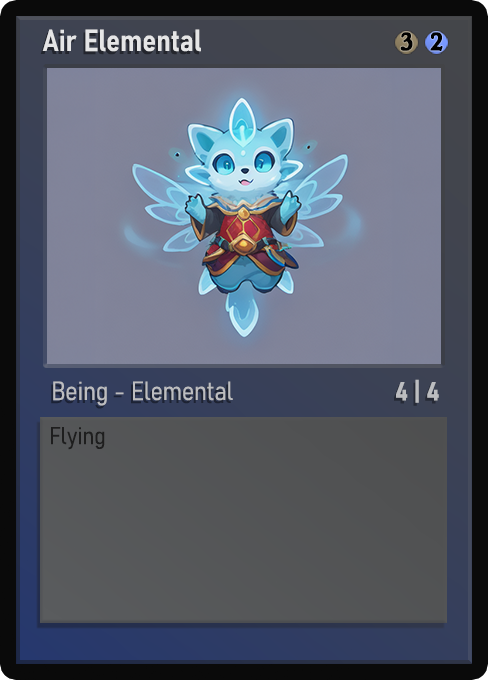
<style>
.page{position:relative;width:488px;height:680px}
.page>*{position:absolute;margin:0}
.t1{font:30px "Bahnschrift-SemiBoldSemiCondensed";color:#f2f2f2;font-weight:bold}
.t2{font:25px "WTRRoycroft";color:#000000;font-weight:bold;scale:1.09 1}
.t3{font:26px "Bahnschrift-LightSemiCondensed";color:#c8c8c8;font-weight:bold}
.t4{font:26px "Bahnschrift-BoldSemiCondensed";color:#bcbdc0;font-weight:bold}
.t5{font:24px "Bahnschrift-LightSemiCondensed";color:#1e1e1e;font-weight:bold}
</style>
<div class="page">
<p class="t1" style="left:42px;top:29px;width:159px;height:23px;opacity:0.9">Air Elemental</p>
<p class="t2" style="left:400px;top:32px;width:13px;height:19px">3</p>
<p class="t2" style="left:430px;top:32px;width:13px;height:19px">2</p>
<p class="t3" style="left:53px;top:381px;width:180px;height:25px;opacity:0.9">Being - Elemental</p>
<p class="t4" style="left:396px;top:379px;width:43px;height:24px">4 | 4</p>
<p class="t5" style="left:51px;top:427px;width:54px;height:23px">Flying</p>
</div>
